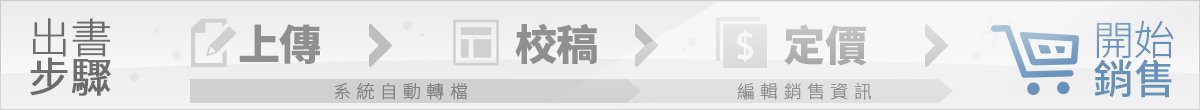
<style>
.page{position:relative;width:1200px;height:110px}
.page>*{position:absolute;margin:0}
.t1{font:41.5px/39.6px "SourceHanSansTC-ExtraLight";letter-spacing:-0.02em;color:#6c6c6c;font-weight:bold}
.t2{font:41.5px/39.6px "SourceHanSansTC-Normal";letter-spacing:-0.02em;color:#6c6c6c;font-weight:bold}
.t3{font:42px "SourceHanSansTC-Heavy";letter-spacing:-0.02em;color:#8f8f8f}
.t4{font:42px "SourceHanSansTC-Heavy";letter-spacing:-0.02em;color:#b7b7b7}
.t5{font:40.8px/39px "SourceHanSansTC-Light";letter-spacing:-0.02em;color:#6590b8}
.t6{font:40.8px/39px "SourceHanSansTC-Medium";letter-spacing:-0.02em;color:#6590b8}
.t7{font:18px "SourceHanSansTC-Light";letter-spacing:0.3em;color:#808080}
.t8{font:18px "SourceHanSansTC-Light";letter-spacing:0.3em;color:#8f8f8f}
</style>
<div class="page">
<p class="t1" style="left:30px;top:18px;width:81px;height:78px">出書<br><span class="t2">步驟</span></p>
<p class="t3" style="left:239px;top:24px;width:82px;height:40px">上傳</p>
<p class="t3" style="left:515px;top:23px;width:82px;height:42px">校稿</p>
<p class="t4" style="left:784px;top:24px;width:83px;height:42px">定價</p>
<p class="t5" style="left:1094px;top:20px;width:80px;height:78px">開始<br><span class="t6">銷售</span></p>
<p class="t7" style="left:334px;top:82px;width:133px;height:18px">系統自動轉檔</p>
<p class="t8" style="left:737px;top:82px;width:134px;height:18px">編輯銷售資訊</p>
</div>
